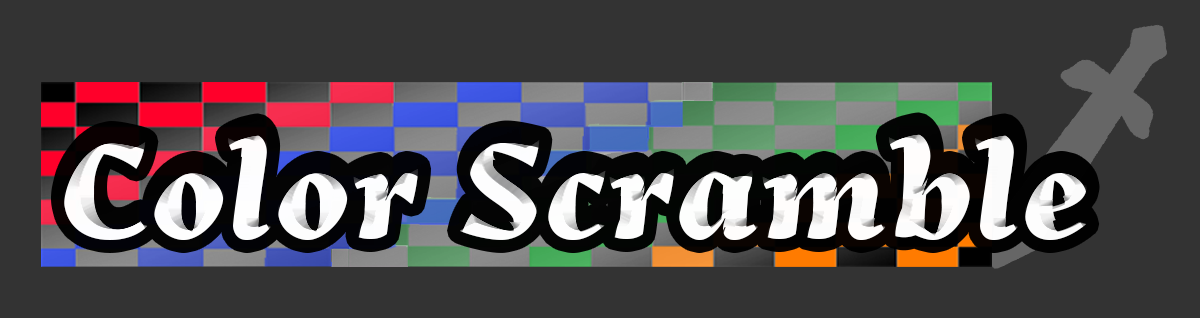
<style>
.page{position:relative;width:1200px;height:318px;background:#333333}
.page>*{position:absolute;margin:0}
.t1{font:150px "ArekLatn-EbIt";letter-spacing:0.025em;color:#ffffff}
</style>
<div class="page">
<p class="t1" style="left:64px;top:125px;width:1023px;height:115px">Color Scramble</p>
</div>
